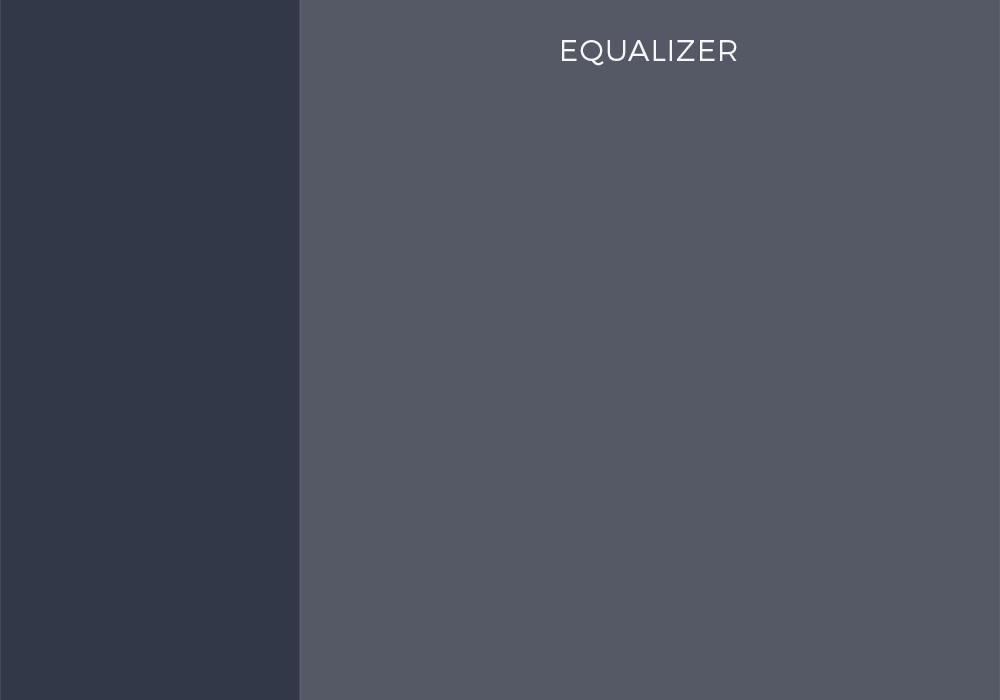
<style>
.page{position:relative;width:1000px;height:700px;background:#545965}
.page>*{position:absolute;margin:0}
.t1{font:30px "Montserrat-Light";letter-spacing:0.025em;color:#f7f7f7}
</style>
<div class="page">
<p class="t1" style="left:562px;top:40px;width:175px;height:26px">EQUALIZER</p>
</div>
